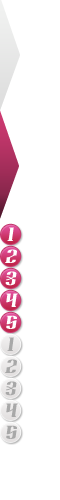
<style>
.page{position:relative;width:60px;height:500px;background:#ffffff}
.page>*{position:absolute;margin:0}
.t1{font:16.7px "Arnprior";color:#ffffff}
.t2{font:16.7px "Arnprior";color:#a8a8a8}
</style>
<div class="page">
<p class="t1" style="left:7px;top:227px;width:7px;height:14px">1</p>
<p class="t1" style="left:5px;top:249px;width:12px;height:14px">2</p>
<p class="t1" style="left:5px;top:271px;width:12px;height:15px">3</p>
<p class="t1" style="left:6px;top:293px;width:12px;height:14px">4</p>
<p class="t1" style="left:6px;top:315px;width:11px;height:14px">5</p>
<p class="t2" style="left:7px;top:337px;width:7px;height:14px">1</p>
<p class="t2" style="left:5px;top:359px;width:12px;height:14px">2</p>
<p class="t2" style="left:5px;top:381px;width:12px;height:15px">3</p>
<p class="t2" style="left:6px;top:403px;width:12px;height:14px">4</p>
<p class="t2" style="left:6px;top:425px;width:11px;height:14px">5</p>
</div>
